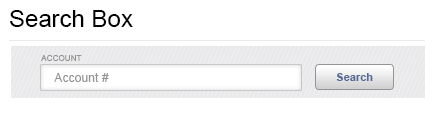
<style>
.page{position:relative;width:433px;height:114px;background:#ffffff}
.page>*{position:absolute;margin:0}
.t1{font:24px "ArialMT";color:#000000}
.t2{font:8px "ArialMT";letter-spacing:0.01em;color:#949494}
.t3{font:12px "ArialMT";letter-spacing:0.01em;color:#949494}
.t4{font:11px "Arial-BoldMT";color:#556996}
</style>
<div class="page">
<p class="t1" style="left:10px;top:10px;width:123px;height:17px">Search Box</p>
<p class="t2" style="left:41px;top:55px;width:41px;height:6px">ACCOUNT</p>
<p class="t3" style="left:54px;top:73px;width:55px;height:9px">Account #</p>
<p class="t4" style="left:336px;top:73px;width:37px;height:8px">Search</p>
</div>
